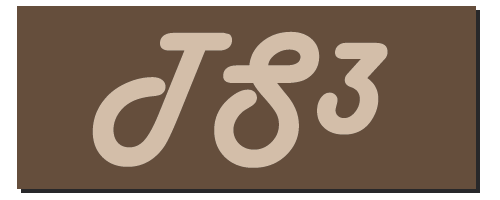
<style>
.page{position:relative;width:500px;height:200px;background:#654e3c}
.page>*{position:absolute;margin:0}
.t1{font:150px "HarlowSolid";color:#d3bea9}
</style>
<div class="page">
<p class="t1" style="left:92px;top:31px;width:296px;height:137px">TS3</p>
</div>
